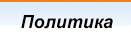
<style>
.page{position:relative;width:131px;height:40px}
.page>*{position:absolute;margin:0}
.t1{font:18px "Arial-BoldItalicMT";color:#050505}
</style>
<div class="page">
<p class="t1" style="left:21px;top:15px;width:92px;height:14px">Политика</p>
</div>
